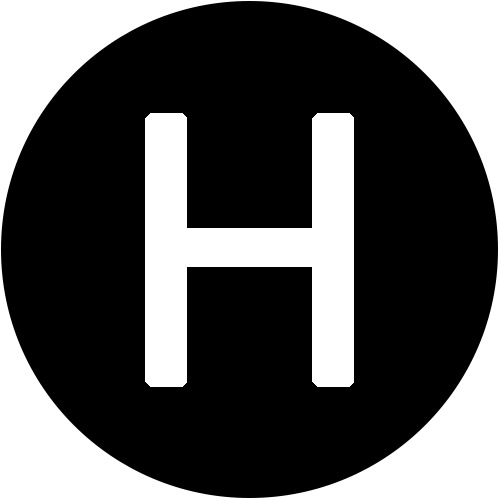
<style>
.page{position:relative;width:500px;height:500px;background:#000000}
.page>*{position:absolute;margin:0}
.t1{font:375px "Ebrima";color:#ffffff;font-weight:bold}
</style>
<div class="page">
<p class="t1" style="left:145px;top:113px;width:209px;height:274px">H</p>
</div>
